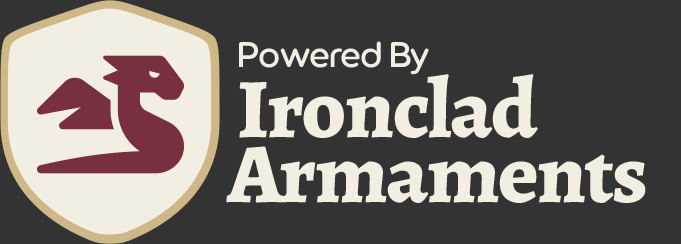
<style>
.page{position:relative;width:681px;height:244px;background:#333333}
.page>*{position:absolute;margin:0}
.t1{font:35.6px "LTSaeada-Regular";letter-spacing:-0.02em;color:#f3eee2}
.t2{font:84.8px "AlegreyaRoman-ExtraBold";letter-spacing:-0.02em;color:#f3eee2}
</style>
<div class="page">
<p class="t1" style="left:239px;top:41px;width:190px;height:34px">Powered By</p>
<p class="t2" style="left:239px;top:74px;width:299px;height:64px">Ironclad</p>
<p class="t2" style="left:226px;top:146px;width:420px;height:57px">Armaments</p>
</div>
